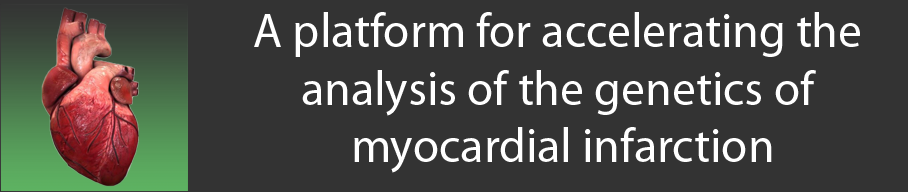
<style>
.page{position:relative;width:908px;height:192px;background:#333333}
.page>*{position:absolute;margin:0}
.t1{font:48px "MyriadPro-Regular";color:#ffffff}
</style>
<div class="page">
<p class="t1" style="left:254px;top:12px;width:606px;height:161px;text-align:center">A platform for accelerating the analysis of the genetics of<br> myocardial infarction</p>
</div>
